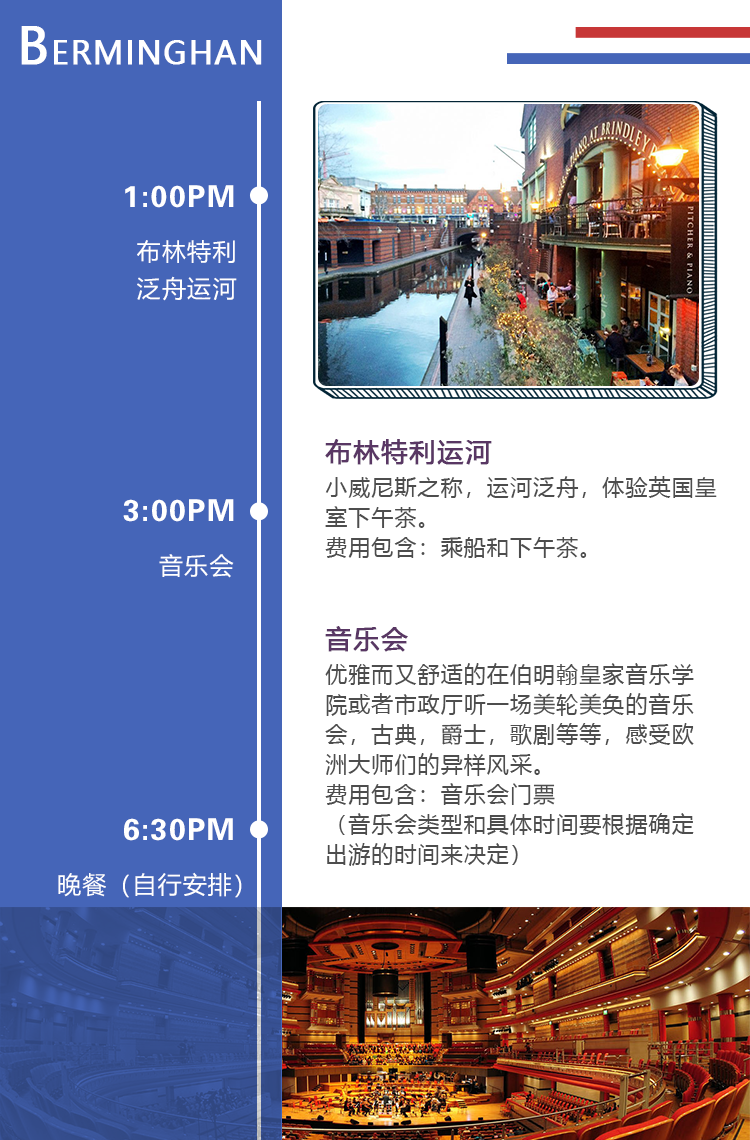
<style>
.page{position:relative;width:750px;height:1140px;background:#ffffff}
.page>*{position:absolute;margin:0}
.t1{font:30.5px "MicrosoftYaHei";letter-spacing:0.05em;color:#ffffff;font-weight:bold}
.t2{font:48.8px "MicrosoftYaHei";letter-spacing:0.05em;color:#ffffff;font-weight:bold}
.t3{font:29.9px "FZZYJW--GB1-0";letter-spacing:0.05em;color:#ffffff}
.t4{font:23.9px/37.4px "MicrosoftYaHei";letter-spacing:0.05em;color:#ffffff}
.t5{font:22px/30px "MicrosoftYaHei";letter-spacing:0.05em;color:#4d4d4d}
.t6{font:26px/37.5px "MicrosoftYaHei";letter-spacing:0.05em;color:#593764;font-weight:bold}
.t7{font:24px "MicrosoftYaHei";letter-spacing:0.05em;color:#ffffff}
.t8{font:30.1px "FZZYJW--GB1-0";letter-spacing:0.05em;color:#ffffff}
.t9{font:24.1px "MicrosoftYaHei";letter-spacing:0.05em;color:#ffffff}
</style>
<div class="page">
<p class="t1" style="left:21px;top:26px;width:241px;height:39px"><span class="t2">B</span>ERMINGHAN</p>
<p class="t3" style="left:125px;top:185px;width:109px;height:23px">1:00PM</p>
<p class="t4" style="left:137px;top:240px;width:100px;height:61px;text-align:right">布林特利<br>泛舟运河</p>
<p class="t5" style="left:325px;top:439px;width:392px;height:119px"><span class="t6">布林特利运河<br></span>小威尼斯之称，运河泛舟，体验英国皇<br>室下午茶。<br>费用包含：乘船和下午茶。</p>
<p class="t3" style="left:123px;top:499px;width:111px;height:23px">3:00PM</p>
<p class="t7" style="left:159px;top:554px;width:75px;height:24px">音乐会</p>
<p class="t5" style="left:325px;top:626px;width:369px;height:240px"><span class="t6">音乐会<br></span>优雅而又舒适的在伯明翰皇家音乐学院或者市政厅听一场美轮美奂的音乐会，古典，爵士，歌剧等等，感受欧洲大师们的异样风采。<br>费用包含：音乐会门票<br>（音乐会类型和具体时间要根据确定出游的时间来决定）</p>
<p class="t8" style="left:124px;top:818px;width:109px;height:23px">6:30PM</p>
<p class="t9" style="left:58px;top:872px;width:184px;height:26px">晚餐（自行安排）</p>
</div>
